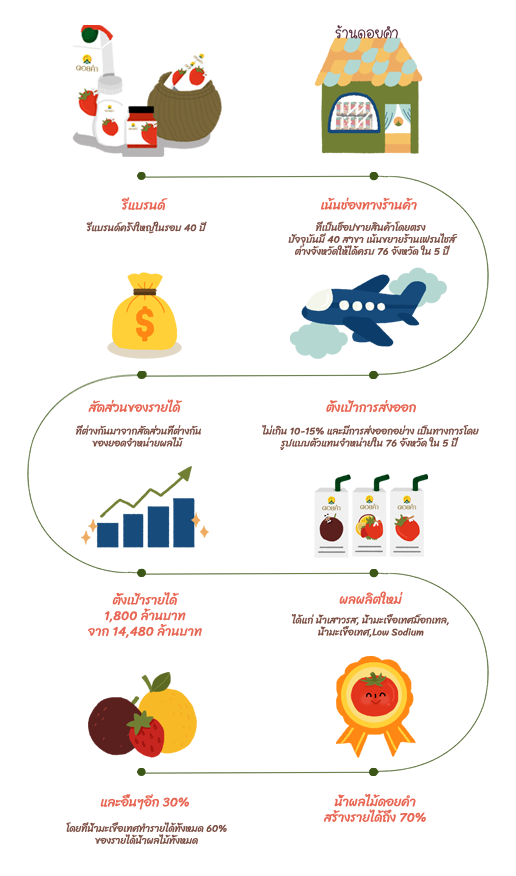
<style>
.page{position:relative;width:516px;height:876px;background:#ffffff}
.page>*{position:absolute;margin:0}
.t1{font:13px "Sriracha-Regular";color:#e86754}
.t2{font:10px "Sriracha-Regular";color:#7e5247}
</style>
<div class="page">
<p class="t1" style="left:121px;top:197px;width:47px;height:14px">รีแบรนด์</p>
<p class="t1" style="left:321px;top:197px;width:96px;height:13px">เน้นช่องทางร้านค้า</p>
<p class="t2" style="left:86px;top:221px;width:121px;height:13px">รีแบรนด์ครั้งใหญ่ในรอบ 40 ปี</p>
<p class="t2" style="left:288px;top:221px;width:170px;height:35px;text-align:center">ที่เป็นช็อปขายสินค้าโดยตรง <br>ปัจจุบันมี 40 สาขา เน้นขยายร้านเฟรนไชส์<br>ต่างจังหวัดให้ได้ครบ 76 จังหวัด ใน 5 ปี</p>
<p class="t1" style="left:88px;top:399px;width:94px;height:14px">สัดส่วนของรายได้</p>
<p class="t1" style="left:326px;top:399px;width:90px;height:14px">ตั้งเป้าการส่งออก</p>
<p class="t2" style="left:75px;top:425px;width:126px;height:22px;text-align:center">ที่ต่างกันมาจากสัดส่วนที่ต่างกัน<br>ของยอดจำหน่ายผลไม้</p>
<p class="t2" style="left:262px;top:425px;width:217px;height:26px;text-align:center">ไม่เกิน 10-15% และมีการส่งออกอย่าง เป็นทางการโดย<br>รูปแบบตัวแทนจำหน่ายใน 76 จังหวัด ใน 5 ปี</p>
<p class="t1" style="left:88px;top:592px;width:114px;height:46px;text-align:center">ตั้งเป้ารายได้<br>1,800 ล้านบาท<br>จาก 14,480 ล้านบาท</p>
<p class="t1" style="left:339px;top:591px;width:64px;height:14px">ผลผลิตใหม่</p>
<p class="t2" style="left:291px;top:614px;width:158px;height:24px;text-align:center">ได้แก่ น้ำเสาวรส, น้ำมะเขือเทศม็อกเทล,<br>น้ำมะเขือเทศ,Low Sodium</p>
<p class="t1" style="left:100px;top:794px;width:89px;height:16px">และอื่นๆอีก 30%</p>
<p class="t1" style="left:323px;top:793px;width:103px;height:30px;text-align:center">น้ำผลไม้ดอยคำ<br>สร้างรายได้ถึง 70%</p>
<p class="t2" style="left:66px;top:822px;width:161px;height:23px;text-align:center">โดยที่น้ำมะเขือเทศทำรายได้ทั้งหมด 60%<br>ของรายได้น้ำผลไม้ทั้งหมด</p>
</div>
